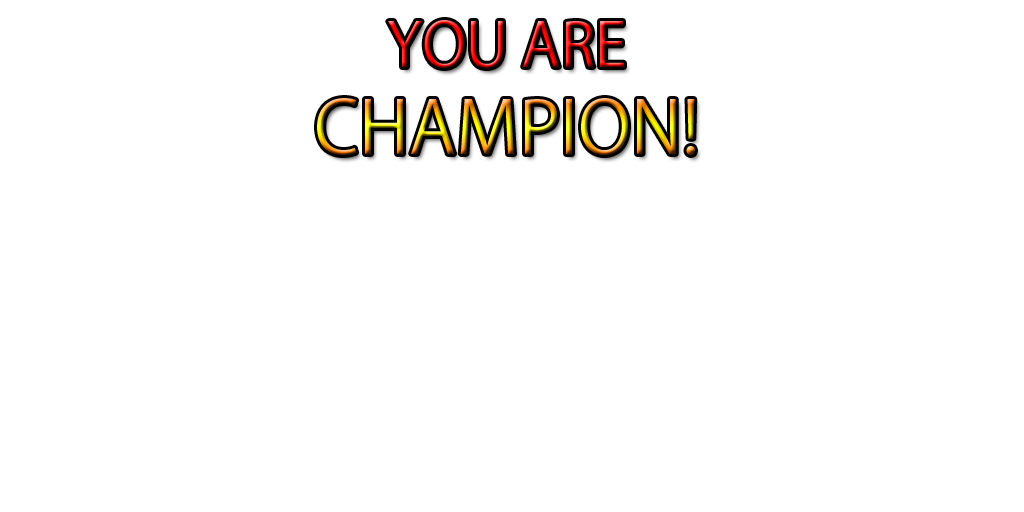
<style>
.page{position:relative;width:1024px;height:512px;background:#ffffff}
.page>*{position:absolute;margin:0}
.t1{font:60px "KozGoPro-Regular"}
.t2{font:72px "KozGoPro-Regular"}
</style>
<div class="page">
<p class="t1" style="left:388px;top:20px;width:236px;height:48px">YOU ARE</p>
<p class="t2" style="left:317px;top:98px;width:378px;height:57px">CHAMPION!</p>
</div>
